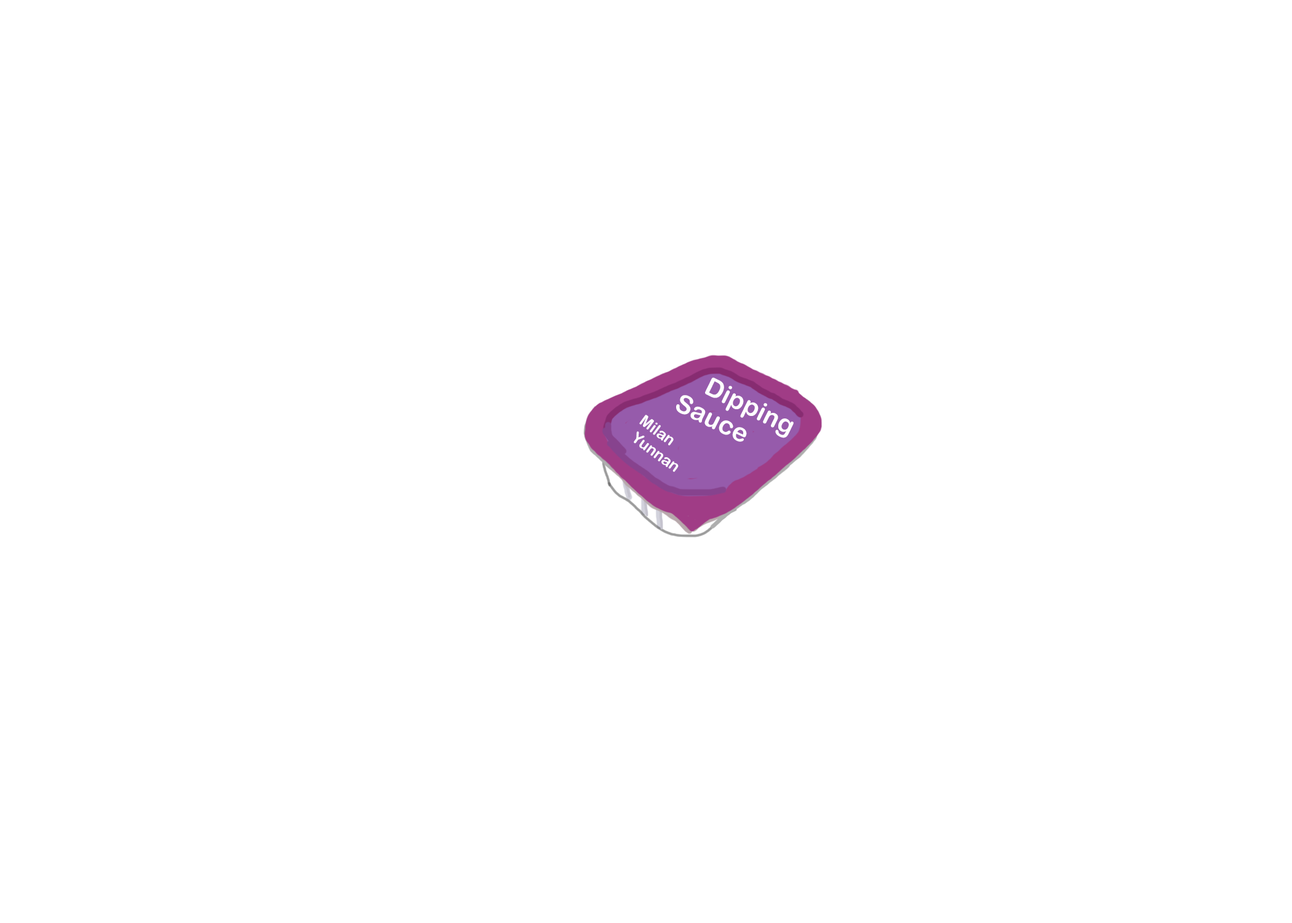
<style>
.page{position:relative;width:1292px;height:923px;background:#ffffff}
.page>*{position:absolute;margin:0}
.t1{font:25.6px "ArialRoundedMTBold";color:#ffffff}
.t2{font:15.4px "ArialRoundedMTBold";color:#ffffff}
</style>
<div class="page">
<p class="t1" style="left:705px;top:377px;width:89px;height:61px;rotate:26deg">Dipping</p>
<p class="t1" style="left:676px;top:395px;width:71px;height:47px;rotate:26deg">Sauce</p>
<p class="t2" style="left:634px;top:415px;width:45px;height:57px;rotate:36deg">Milan <br> Yunnan</p>
</div>
